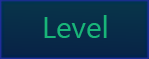
<style>
.page{position:relative;width:149px;height:59px}
.page>*{position:absolute;margin:0}
.t1{font:30px "SegoeUISymbol";color:#19b579}
</style>
<div class="page">
<p class="t1" style="left:44px;top:15px;width:63px;height:23px">Level</p>
</div>
